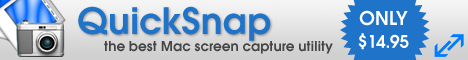
<style>
.page{position:relative;width:468px;height:60px}
.page>*{position:absolute;margin:0}
.t1{font:40px "AvantGardeITC-Demi";color:#1f73c8}
.t2{font:19px "AvantGardeITC-Demi";color:#ffffff}
.t3{font:21px "AvantGardeITC-Demi";color:#ffffff}
.t4{font:15px "AvantGardeITC-Demi";color:#454545}
</style>
<div class="page">
<p class="t1" style="left:78px;top:6px;width:193px;height:35px">QuickSnap</p>
<p class="t2" style="left:358px;top:10px;width:51px;height:40px;text-align:center"><span class="t3">ONLY<br></span>$14.95</p>
<p class="t4" style="left:104px;top:41px;width:229px;height:13px">the best Mac screen capture utility</p>
</div>
